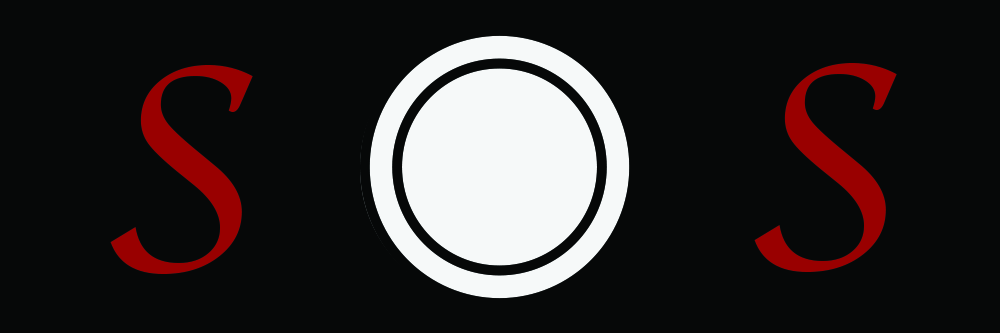
<style>
.page{position:relative;width:1000px;height:333px;background:#060808}
.page>*{position:absolute;margin:0}
.t1{font:300px "Apple-Chancery";color:#990000}
</style>
<div class="page">
<p class="t1" style="left:110px;top:65px;width:143px;height:209px">S</p>
<p class="t1" style="left:754px;top:63px;width:143px;height:209px">S</p>
</div>
